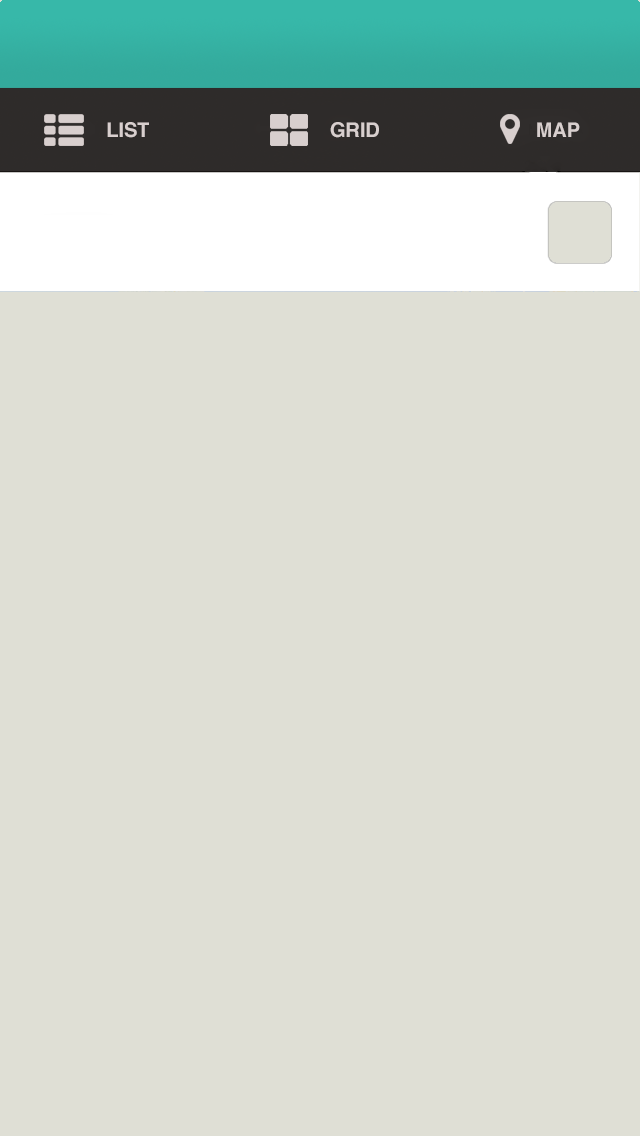
<style>
.page{position:relative;width:640px;height:1136px;background:#dfdfd5}
.page>*{position:absolute;margin:0}
.t1{font:20px "Helvetica-Bold";color:#d8cfce}
</style>
<div class="page">
<p class="t1" style="left:107px;top:122px;width:42px;height:16px">LIST</p>
<p class="t1" style="left:330px;top:122px;width:49px;height:16px">GRID</p>
<p class="t1" style="left:537px;top:122px;width:43px;height:15px">MAP</p>
</div>
